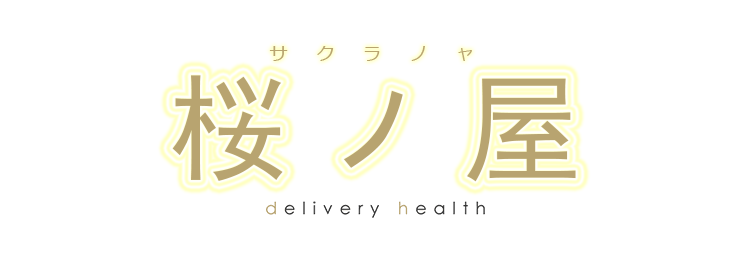
<style>
.page{position:relative;width:750px;height:264px;background:#ffffff}
.page>*{position:absolute;margin:0}
.t1{font:18px "Meiryo";letter-spacing:1.6em;color:#b8a470}
.t2{font:120px "SimHei";letter-spacing:0.22em;color:#b8a470}
</style>
<div class="page">
<p class="t1" style="left:269px;top:46px;width:203px;height:15px">サクラノャ</p>
<p class="t2" style="left:172px;top:75px;width:404px;height:107px">桜ノ屋</p>
</div>
